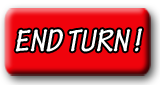
<style>
.page{position:relative;width:160px;height:85px;background:#f0030c}
.page>*{position:absolute;margin:0}
.t1{font:33.3px "TektonPro-BoldCond";color:#ffffff;font-style:italic}
</style>
<div class="page">
<p class="t1" style="left:15px;top:28px;width:127px;height:24px">END TURN !</p>
</div>
